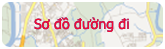
<style>
.page{position:relative;width:165px;height:49px}
.page>*{position:absolute;margin:0}
.t1{font:14px "Tahoma";color:#f30a31}
</style>
<div class="page">
<p class="t1" style="left:34px;top:17px;width:95px;height:15px">Sơ đồ đường đi</p>
<p class="t1" style="left:34px;top:17px;width:95px;height:15px">Sơ đồ đường đi</p>
</div>
